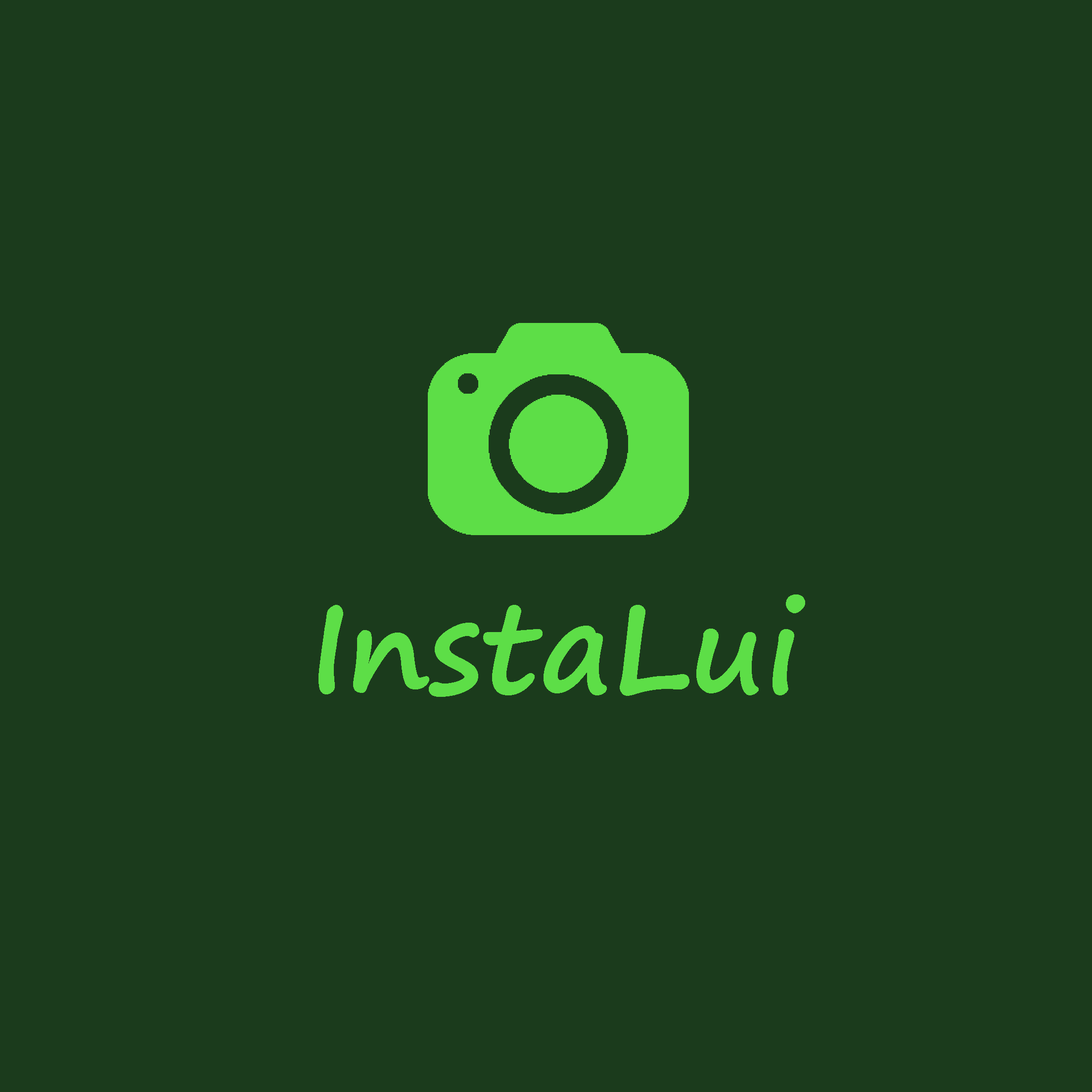
<style>
.page{position:relative;width:1092px;height:1092px;background:#1b3b1c}
.page>*{position:absolute;margin:0}
.t1{font:123.6px "SegoePrint-Bold";color:#5dde47}
</style>
<div class="page">
<p class="t1" style="left:318px;top:594px;width:487px;height:103px">InstaLui</p>
</div>
